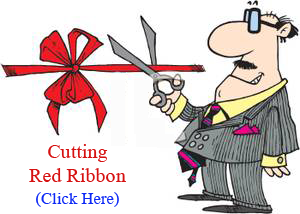
<style>
.page{position:relative;width:300px;height:214px;background:#ffffff}
.page>*{position:absolute;margin:0}
.t1{font:30.5px "AngsanaNew";color:#d61111}
.t2{font:25.4px "AngsanaNew";color:#0d29f5}
</style>
<div class="page">
<p class="t1" style="left:48px;top:144px;width:60px;height:18px">Cutting</p>
<p class="t1" style="left:29px;top:168px;width:97px;height:14px">Red Ribbon</p>
<p class="t2" style="left:36px;top:192px;width:83px;height:15px">(Click Here)</p>
</div>
